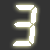
<style>
.page{position:relative;width:50px;height:50px;background:#333333}
.page>*{position:absolute;margin:0}
.t1{font:55px "LiquidCrystal";color:#ffffff}
</style>
<div class="page">
<p class="t1" style="left:13px;top:5px;width:24px;height:41px">3</p>
</div>
